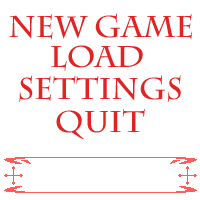
<style>
.page{position:relative;width:200px;height:200px;background:#ffffff}
.page>*{position:absolute;margin:0}
.t1{font:30px "CharlemagneStd-Bold";color:#e22323}
</style>
<div class="page">
<p class="t1" style="left:9px;top:13px;width:184px;height:27px">NEW GAME</p>
<p class="t1" style="left:50px;top:45px;width:93px;height:26px">LOAD</p>
<p class="t1" style="left:19px;top:75px;width:162px;height:27px">SETTINGS</p>
<p class="t1" style="left:56px;top:109px;width:89px;height:30px">QUIT</p>
</div>
